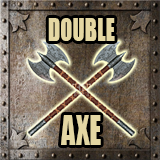
<style>
.page{position:relative;width:160px;height:160px}
.page>*{position:absolute;margin:0}
.t1{font:29.4px "Impact";color:#e4d7a3;scale:0.76 1}
.t2{font:37.5px "Impact";color:#e4d7a3;scale:0.75 1}
</style>
<div class="page">
<p class="t1" style="left:48px;top:18px;width:67px;height:23px">DOUBLE</p>
<p class="t2" style="left:61px;top:115px;width:40px;height:30px">AXE</p>
</div>
